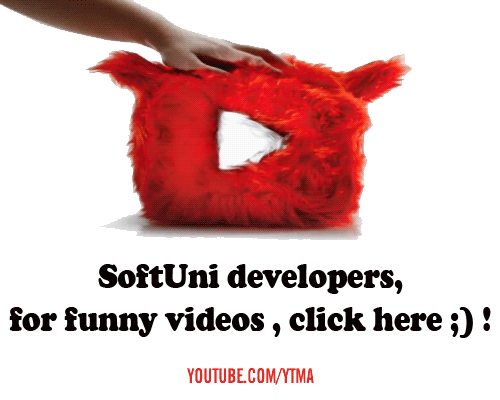
<style>
.page{position:relative;width:500px;height:400px;background:#ffffff}
.page>*{position:absolute;margin:0}
.t1{font:36px "CooperBlack";color:#080000;scale:0.85 1}
</style>
<div class="page">
<p class="t1" style="left:9px;top:264px;width:482px;height:74px;text-align:center">SoftUni developers,<br>for funny videos , click here ;) !</p>
</div>
